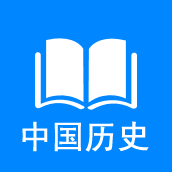
<style>
.page{position:relative;width:172px;height:172px;background:#0087ff}
.page>*{position:absolute;margin:0}
.t1{font:32px "SimHei";color:#ffffff;font-weight:bold}
</style>
<div class="page">
<p class="t1" style="left:22px;top:121px;width:127px;height:31px">中国历史</p>
</div>
